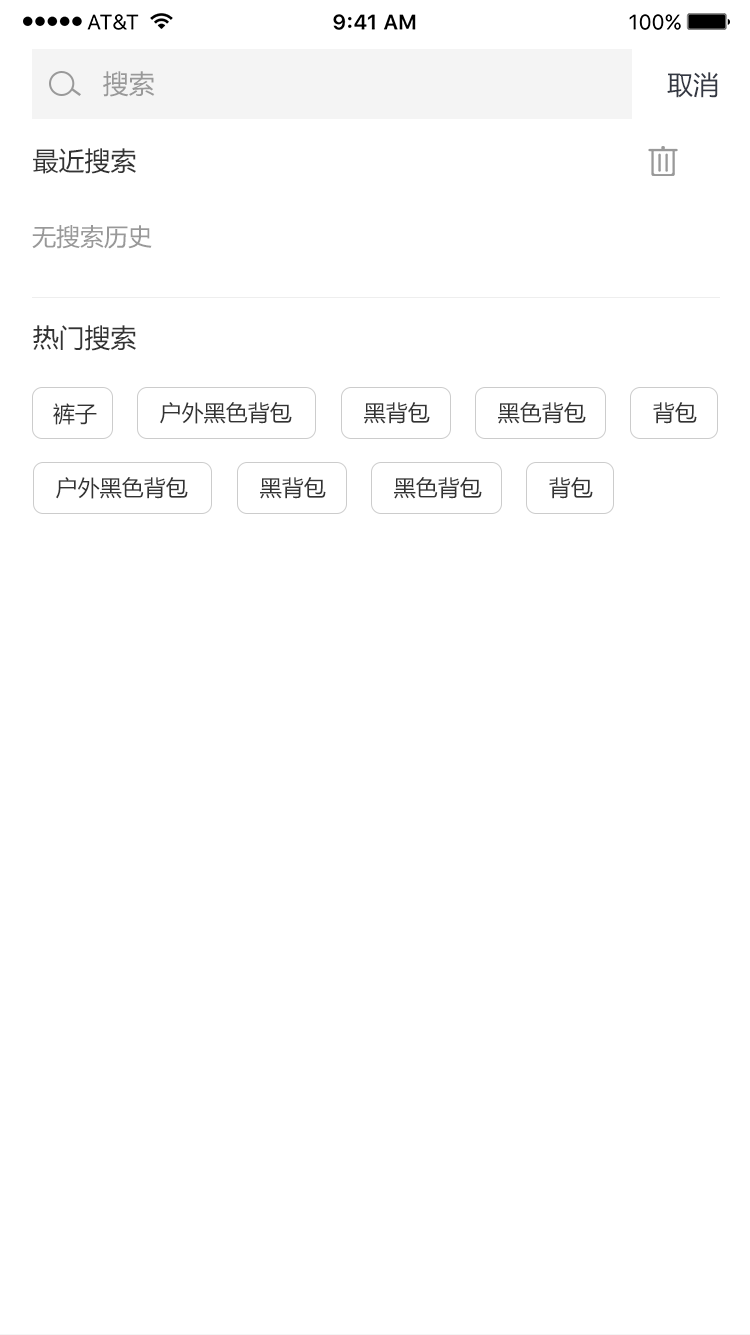
<style>
.page{position:relative;width:750px;height:1335px;background:#ffffff}
.page>*{position:absolute;margin:0}
.t1{font:26px "MicrosoftYaHei";color:#999999}
.t2{font:26px "MicrosoftYaHei";color:#343843}
.t3{font:26px "MicrosoftYaHei";color:#333333}
.t4{font:24px "MicrosoftYaHei";color:#999999}
.t5{font:22px "MicrosoftYaHei";color:#333333}
</style>
<div class="page">
<p class="t1" style="left:103px;top:71px;width:52px;height:26px">搜索</p>
<p class="t2" style="left:667px;top:72px;width:51px;height:26px">取消</p>
<p class="t3" style="left:33px;top:148px;width:103px;height:26px">最近搜索</p>
<p class="t4" style="left:32px;top:225px;width:120px;height:24px">无搜索历史</p>
<p class="t3" style="left:33px;top:325px;width:103px;height:26px">热门搜索</p>
<p class="t5" style="left:53px;top:403px;width:44px;height:22px">裤子</p>
<p class="t5" style="left:160px;top:402px;width:132px;height:22px">户外黑色背包</p>
<p class="t5" style="left:364px;top:402px;width:66px;height:22px">黑背包</p>
<p class="t5" style="left:498px;top:402px;width:88px;height:22px">黑色背包</p>
<p class="t5" style="left:653px;top:402px;width:44px;height:22px">背包</p>
<p class="t5" style="left:56px;top:477px;width:132px;height:22px">户外黑色背包</p>
<p class="t5" style="left:260px;top:477px;width:66px;height:22px">黑背包</p>
<p class="t5" style="left:394px;top:477px;width:88px;height:22px">黑色背包</p>
<p class="t5" style="left:549px;top:477px;width:44px;height:22px">背包</p>
</div>
